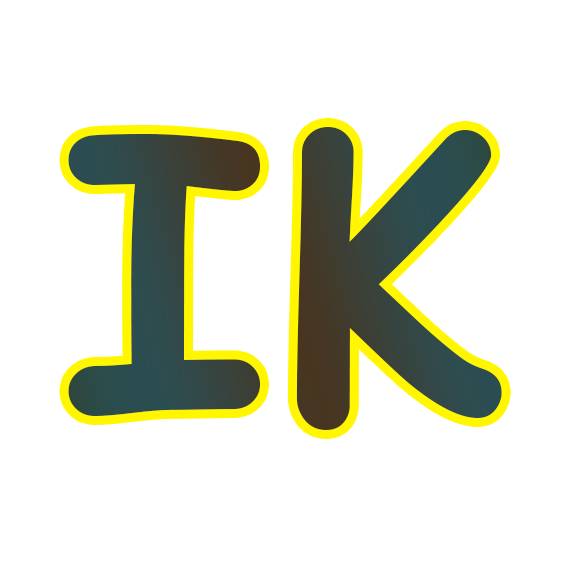
<style>
.page{position:relative;width:561px;height:561px;background:#ffffff}
.page>*{position:absolute;margin:0}
.t1{font:377.8px "ComicSansMS-Bold";letter-spacing:0.025em;color:#354642}
</style>
<div class="page">
<p class="t1" style="left:68px;top:127px;width:434px;height:303px">IK</p>
</div>
